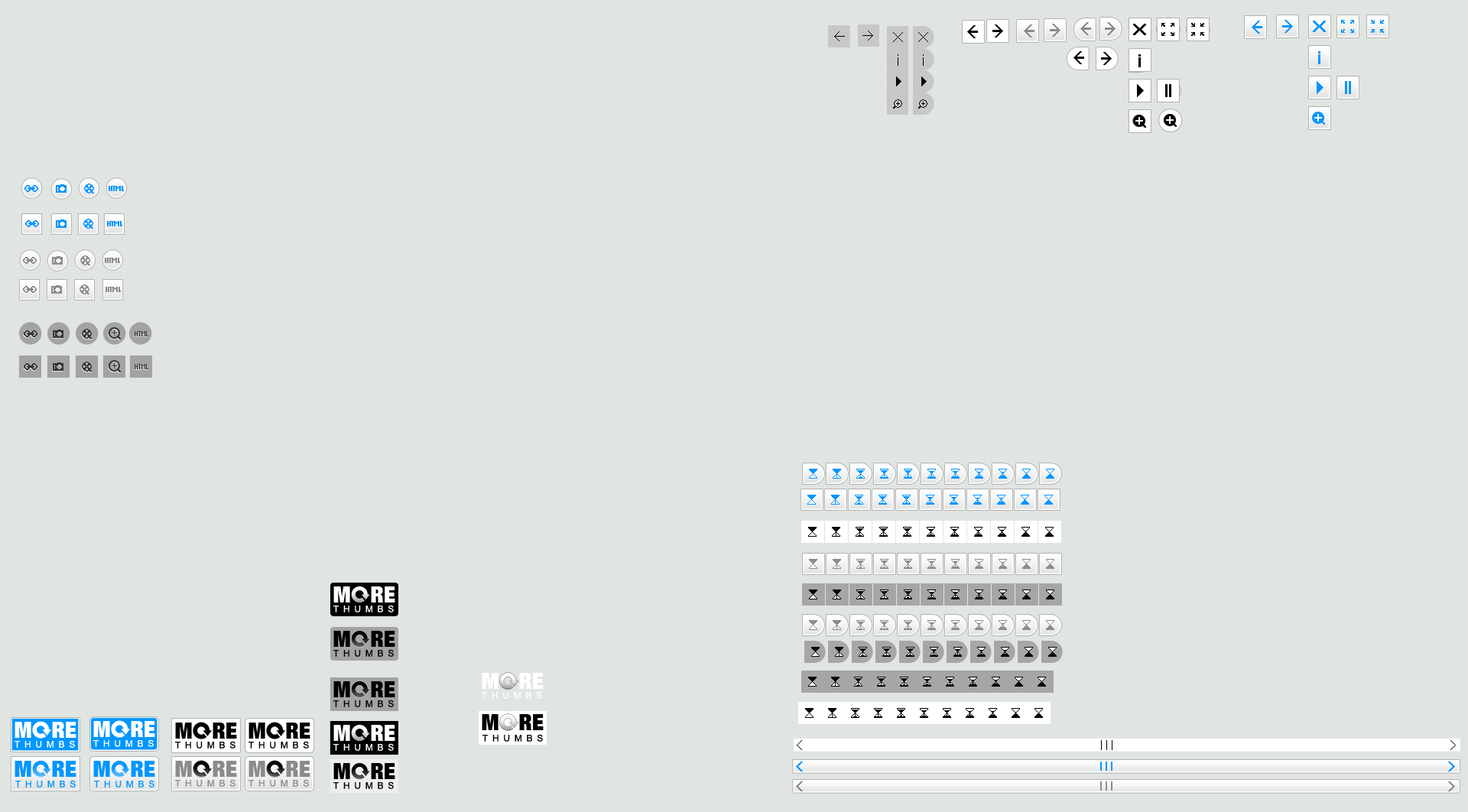
<style>
.page{position:relative;width:1468px;height:812px;background:#e0e5e1}
.page>*{position:absolute;margin:0}
.t1{font:22.9px "HelveticaNeueLTCom-XBlkCn";color:#fffefe}
.t2{font:22.9px "HelveticaNeueLTCom-XBlkCn";color:#ffffff}
.t3{font:9.2px "ArialMT";letter-spacing:0.48em;color:#ffffff}
.t4{font:22.9px "HelveticaNeueLTCom-XBlkCn";color:#000000}
.t5{font:9.2px "ArialMT";letter-spacing:0.48em;color:#000000}
.t6{font:22.9px "HelveticaNeueLTCom-XBlkCn";color:#0096ff}
.t7{font:22.9px "HelveticaNeueLTCom-XBlkCn";color:#8b8b8b}
.t8{font:9.2px "ArialMT";letter-spacing:0.48em;color:#0096ff}
.t9{font:9.2px "ArialMT";letter-spacing:0.48em;color:#8b8b8b}
</style>
<div class="page">
<p class="t1" style="left:333px;top:587px;width:17px;height:16px">M</p>
<p class="t2" style="left:371px;top:587px;width:24px;height:16px">RE</p>
<p class="t3" style="left:333px;top:605px;width:61px;height:8px">THUMBS</p>
<p class="t4" style="left:333px;top:631px;width:17px;height:16px">M</p>
<p class="t4" style="left:371px;top:631px;width:24px;height:16px">RE</p>
<p class="t5" style="left:333px;top:649px;width:61px;height:8px">THUMBS</p>
<p class="t1" style="left:482px;top:673px;width:17px;height:16px">M</p>
<p class="t2" style="left:519px;top:673px;width:25px;height:16px">RE</p>
<p class="t4" style="left:333px;top:681px;width:17px;height:16px">M</p>
<p class="t4" style="left:371px;top:681px;width:24px;height:16px">RE</p>
<p class="t5" style="left:333px;top:700px;width:61px;height:7px">THUMBS</p>
<p class="t3" style="left:482px;top:691px;width:60px;height:8px">THUMBS</p>
<p class="t2" style="left:15px;top:722px;width:16px;height:16px">M</p>
<p class="t2" style="left:52px;top:722px;width:24px;height:16px">RE</p>
<p class="t1" style="left:93px;top:721px;width:17px;height:16px">M</p>
<p class="t2" style="left:131px;top:721px;width:24px;height:16px">RE</p>
<p class="t4" style="left:175px;top:723px;width:17px;height:16px">M</p>
<p class="t4" style="left:213px;top:723px;width:24px;height:16px">RE</p>
<p class="t4" style="left:249px;top:723px;width:16px;height:16px">M</p>
<p class="t4" style="left:286px;top:723px;width:24px;height:16px">RE</p>
<p class="t1" style="left:333px;top:725px;width:17px;height:16px">M</p>
<p class="t2" style="left:371px;top:725px;width:24px;height:16px">RE</p>
<p class="t4" style="left:482px;top:714px;width:17px;height:16px">M</p>
<p class="t4" style="left:519px;top:714px;width:25px;height:16px">RE</p>
<p class="t5" style="left:483px;top:734px;width:60px;height:8px">THUMBS</p>
<p class="t3" style="left:15px;top:740px;width:60px;height:8px">THUMBS</p>
<p class="t3" style="left:93px;top:739px;width:61px;height:8px">THUMBS</p>
<p class="t5" style="left:175px;top:741px;width:61px;height:8px">THUMBS</p>
<p class="t5" style="left:249px;top:741px;width:60px;height:8px">THUMBS</p>
<p class="t3" style="left:333px;top:743px;width:61px;height:8px">THUMBS</p>
<p class="t6" style="left:15px;top:761px;width:16px;height:16px">M</p>
<p class="t6" style="left:52px;top:761px;width:24px;height:16px">RE</p>
<p class="t6" style="left:93px;top:761px;width:17px;height:16px">M</p>
<p class="t6" style="left:131px;top:761px;width:24px;height:16px">RE</p>
<p class="t7" style="left:175px;top:761px;width:17px;height:16px">M</p>
<p class="t7" style="left:213px;top:761px;width:24px;height:16px">RE</p>
<p class="t7" style="left:249px;top:761px;width:16px;height:16px">M</p>
<p class="t7" style="left:286px;top:761px;width:24px;height:16px">RE</p>
<p class="t4" style="left:333px;top:763px;width:17px;height:16px">M</p>
<p class="t4" style="left:371px;top:763px;width:24px;height:16px">RE</p>
<p class="t8" style="left:15px;top:780px;width:61px;height:8px">THUMBS</p>
<p class="t8" style="left:94px;top:780px;width:60px;height:8px">THUMBS</p>
<p class="t9" style="left:175px;top:779px;width:61px;height:8px">THUMBS</p>
<p class="t9" style="left:249px;top:779px;width:60px;height:8px">THUMBS</p>
<p class="t5" style="left:333px;top:782px;width:61px;height:7px">THUMBS</p>
</div>
